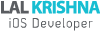
<style>
.page{position:relative;width:100px;height:33px;background:#ffffff}
.page>*{position:absolute;margin:0}
.t1{font:18.1px "MyriadPro-Bold";letter-spacing:-0.04em;color:#17bed2}
.t2{font:18.1px "MyriadPro-Bold";letter-spacing:-0.04em;color:#5a5d61}
.t3{font:13.3px "Dekar";letter-spacing:0.087em;color:#5a5d61}
</style>
<div class="page">
<p class="t1" style="left:1px;top:0px;width:100px;height:14px"><span class="t2">LAL </span>KRISHNA</p>
<p class="t3" style="left:9px;top:18px;width:84px;height:13px">iOS Developer</p>
</div>
